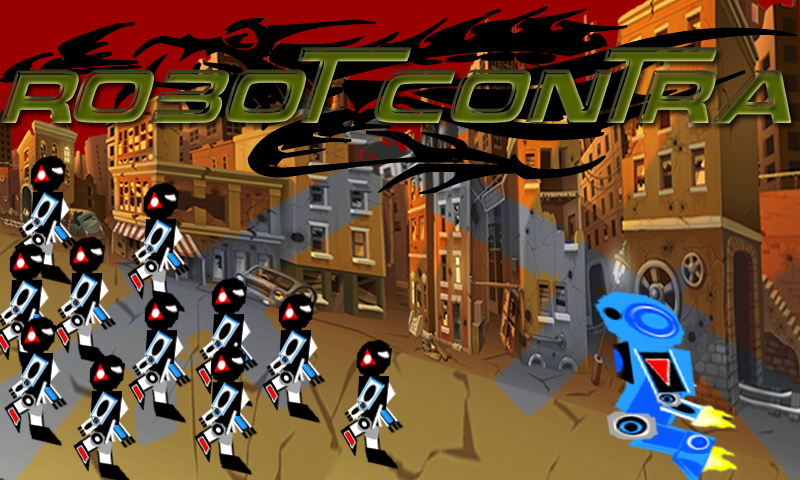
<style>
.page{position:relative;width:800px;height:480px}
.page>*{position:absolute;margin:0}
.t1{font:241.1px "DragonsTfb";color:#000000;scale:1.21 1}
.t2{font:55px "OverThere"}
</style>
<div class="page">
<p class="t1" style="left:0px;top:5px;width:797px;height:189px">v</p>
<p class="t2" style="left:0px;top:47px;width:792px;height:77px">robot  contra</p>
</div>
